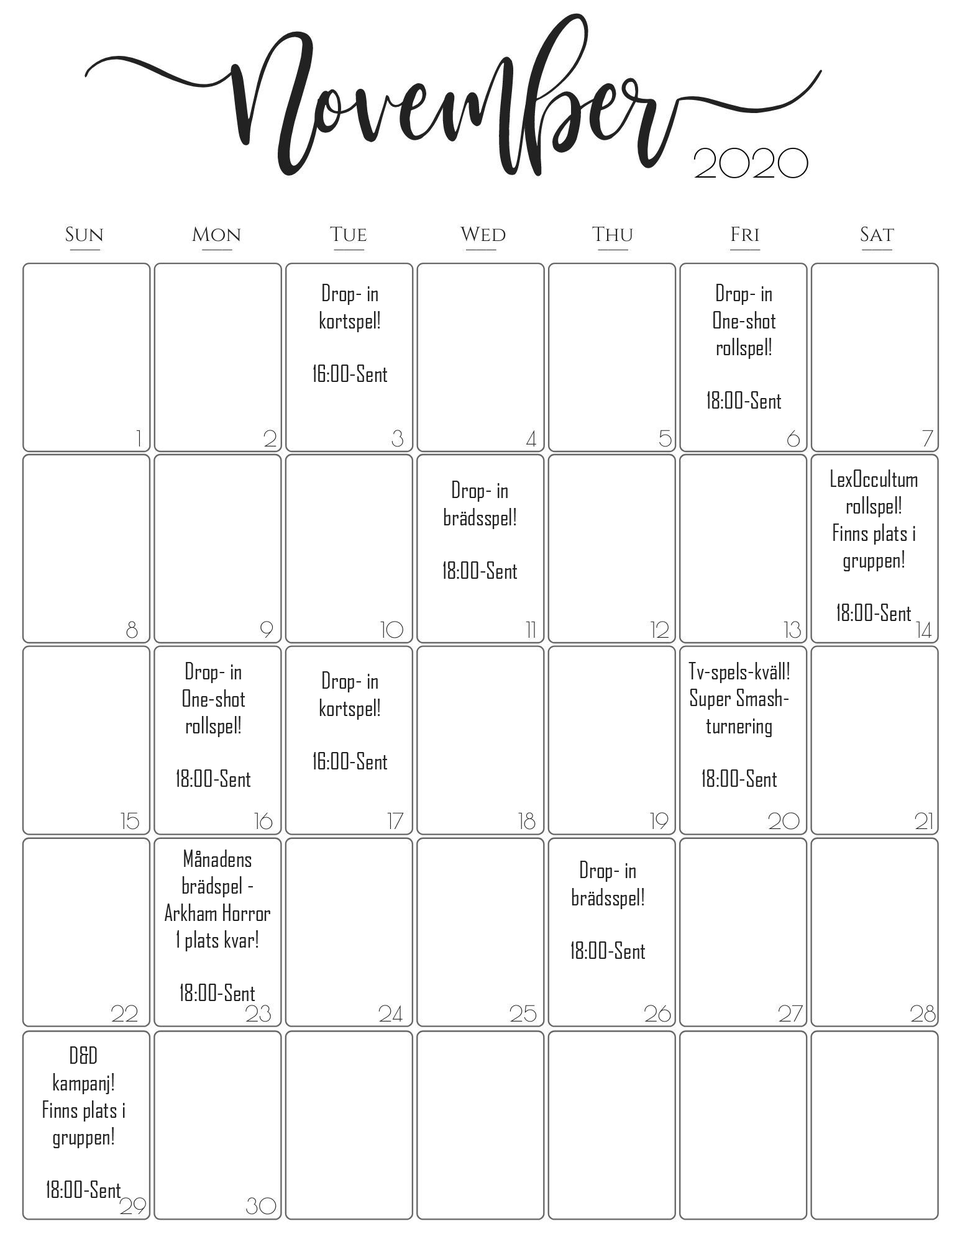
<style>
.page{position:relative;width:960px;height:1242px;background:#ffffff}
.page>*{position:absolute;margin:0}
.t1{font:22.4px "AgencyFB-Reg";color:#222222}
</style>
<div class="page">
<p class="t1" style="left:313px;top:284px;width:74px;height:98px;text-align:center">Drop- in kortspel!<br><br>16:00-Sent</p>
<p class="t1" style="left:707px;top:284px;width:74px;height:125px;text-align:center">Drop- in One-shot <br>rollspel!<br><br>18:00-Sent</p>
<p class="t1" style="left:831px;top:470px;width:87px;height:151px;text-align:center">LexOccultum<br>rollspel!<br>Finns plats i gruppen!<br><br>18:00-Sent</p>
<p class="t1" style="left:443px;top:481px;width:74px;height:98px;text-align:center">Drop- in brädsspel!<br><br>18:00-Sent</p>
<p class="t1" style="left:176px;top:662px;width:74px;height:125px;text-align:center">Drop- in One-shot <br>rollspel!<br><br>18:00-Sent</p>
<p class="t1" style="left:688px;top:662px;width:101px;height:125px;text-align:center">Tv-spels-kväll!<br>Super Smash-<br>turnering<br><br>18:00-Sent</p>
<p class="t1" style="left:313px;top:672px;width:74px;height:98px;text-align:center">Drop- in kortspel!<br><br>16:00-Sent</p>
<p class="t1" style="left:165px;top:850px;width:105px;height:151px;text-align:center">Månadens <br>brädspel -<br>Arkham Horror<br>1 plats kvar!<br><br>18:00-Sent</p>
<p class="t1" style="left:571px;top:861px;width:74px;height:98px;text-align:center">Drop- in brädsspel!<br><br>18:00-Sent</p>
<p class="t1" style="left:43px;top:1047px;width:82px;height:151px;text-align:center">D&amp;D<br>kampanj!<br>Finns plats i gruppen!<br><br>18:00-Sent</p>
</div>
